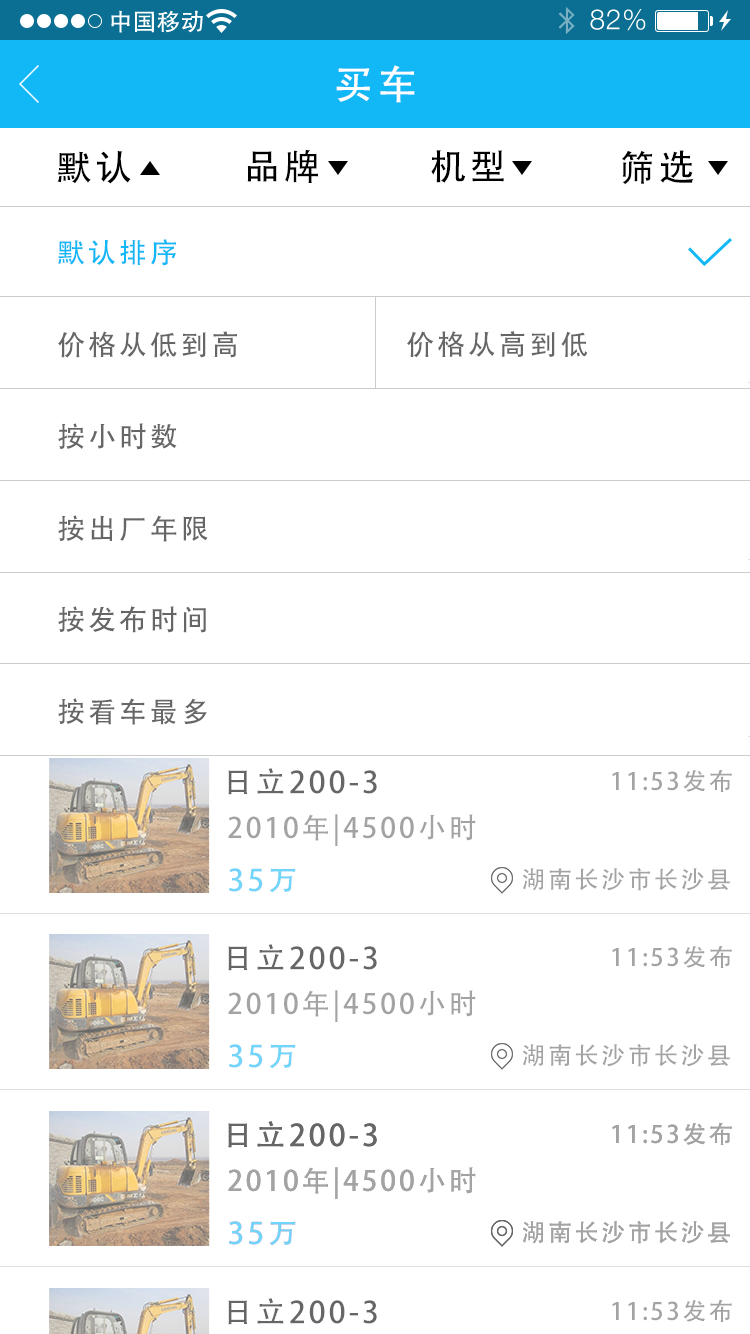
<style>
.page{position:relative;width:750px;height:1334px;background:#ffffff}
.page>*{position:absolute;margin:0}
.t1{font:40px "AdobeHeitiStd-Regular";letter-spacing:0.104em;color:#ffffff}
.t2{font:36px "AdobeHeitiStd-Regular";letter-spacing:0.104em;color:#000000}
.t3{font:28px "AdobeHeitiStd-Regular";letter-spacing:0.104em;color:#12b8f6}
.t4{font:28px "AdobeHeitiStd-Regular";letter-spacing:0.104em;color:#666666}
.t5{font:30px "AdobeHeitiStd-Regular";letter-spacing:0.104em;color:#666666}
.t6{font:24px "AdobeHeitiStd-Regular";letter-spacing:0.104em;color:#a3a3a3}
.t7{font:28px "AdobeHeitiStd-Regular";letter-spacing:0.104em;color:#a3a3a3}
.t8{font:30px "AdobeHeitiStd-Regular";letter-spacing:0.104em;color:#71d4fa}
</style>
<div class="page">
<p class="t1" style="left:336px;top:65px;width:79px;height:38px">买车</p>
<p class="t2" style="left:247px;top:149px;width:71px;height:34px">品牌</p>
<p class="t2" style="left:431px;top:150px;width:73px;height:33px">机型</p>
<p class="t2" style="left:621px;top:150px;width:73px;height:35px">筛选</p>
<p class="t2" style="left:57px;top:151px;width:74px;height:33px">默认</p>
<p class="t3" style="left:58px;top:239px;width:118px;height:27px">默认排序</p>
<p class="t4" style="left:58px;top:331px;width:179px;height:27px">价格从低到高</p>
<p class="t4" style="left:407px;top:331px;width:181px;height:27px">价格从高到低</p>
<p class="t4" style="left:58px;top:423px;width:119px;height:27px">按小时数</p>
<p class="t4" style="left:58px;top:515px;width:150px;height:27px">按出厂年限</p>
<p class="t4" style="left:58px;top:606px;width:148px;height:27px">按发布时间</p>
<p class="t4" style="left:58px;top:698px;width:149px;height:27px">按看车最多</p>
<p class="t5" style="left:228px;top:768px;width:149px;height:27px">日立200-3</p>
<p class="t6" style="left:612px;top:769px;width:120px;height:23px">11:53发布</p>
<p class="t7" style="left:228px;top:814px;width:248px;height:32px">2010年|4500小时</p>
<p class="t8" style="left:228px;top:868px;width:68px;height:25px">35万</p>
<p class="t6" style="left:523px;top:868px;width:207px;height:23px">湖南长沙市长沙县</p>
<p class="t5" style="left:228px;top:944px;width:149px;height:27px">日立200-3</p>
<p class="t6" style="left:612px;top:945px;width:120px;height:23px">11:53发布</p>
<p class="t7" style="left:228px;top:990px;width:248px;height:32px">2010年|4500小时</p>
<p class="t8" style="left:228px;top:1044px;width:68px;height:25px">35万</p>
<p class="t6" style="left:523px;top:1044px;width:207px;height:23px">湖南长沙市长沙县</p>
<p class="t5" style="left:228px;top:1121px;width:149px;height:27px">日立200-3</p>
<p class="t5" style="left:228px;top:1121px;width:149px;height:27px">日立200-3</p>
<p class="t6" style="left:612px;top:1122px;width:120px;height:23px">11:53发布</p>
<p class="t6" style="left:612px;top:1122px;width:120px;height:23px">11:53发布</p>
<p class="t7" style="left:228px;top:1167px;width:248px;height:32px">2010年|4500小时</p>
<p class="t7" style="left:228px;top:1167px;width:248px;height:32px">2010年|4500小时</p>
<p class="t8" style="left:228px;top:1221px;width:68px;height:25px">35万</p>
<p class="t8" style="left:228px;top:1221px;width:68px;height:25px">35万</p>
<p class="t6" style="left:523px;top:1221px;width:207px;height:23px">湖南长沙市长沙县</p>
<p class="t6" style="left:523px;top:1221px;width:207px;height:23px">湖南长沙市长沙县</p>
<p class="t5" style="left:228px;top:1298px;width:149px;height:27px">日立200-3</p>
<p class="t6" style="left:612px;top:1299px;width:120px;height:23px">11:53发布</p>
</div>
